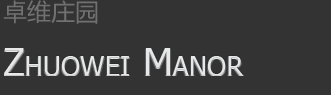
<style>
.page{position:relative;width:331px;height:95px;background:#333333}
.page>*{position:absolute;margin:0}
.t1{font:24px "MicrosoftYaHei";color:#717171;text-transform:uppercase}
.t2{font:39px "Tahoma";color:#e7e8e9;font-variant:small-caps}
</style>
<div class="page">
<p class="t1" style="left:3px;top:0px;width:95px;height:24px">卓维庄园</p>
<p class="t2" style="left:4px;top:48px;width:240px;height:28px">Zhuowei Manor</p>
</div>
